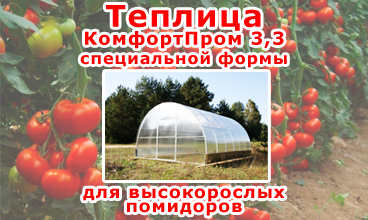
<style>
.page{position:relative;width:368px;height:220px}
.page>*{position:absolute;margin:0}
.t1{font:16px "Verdana-Bold";letter-spacing:0.06em;color:#ff0000}
.t2{font:30px/18px "Verdana-Bold";letter-spacing:0.06em;color:#ff0000}
.t3{font:18px/18px "Verdana-Bold";letter-spacing:0.06em;color:#ff0000}
.t4{font:17px "Verdana-Bold";letter-spacing:0.06em;color:#ff0000}
</style>
<div class="page">
<p class="t1" style="left:80px;top:5px;width:207px;height:63px;text-align:center"><span class="t2">Теплица </span><span class="t3">КомфортПром 3,3<br></span>специальной формы</p>
<p class="t4" style="left:83px;top:188px;width:202px;height:28px">для высокорослых помидоров</p>
</div>
